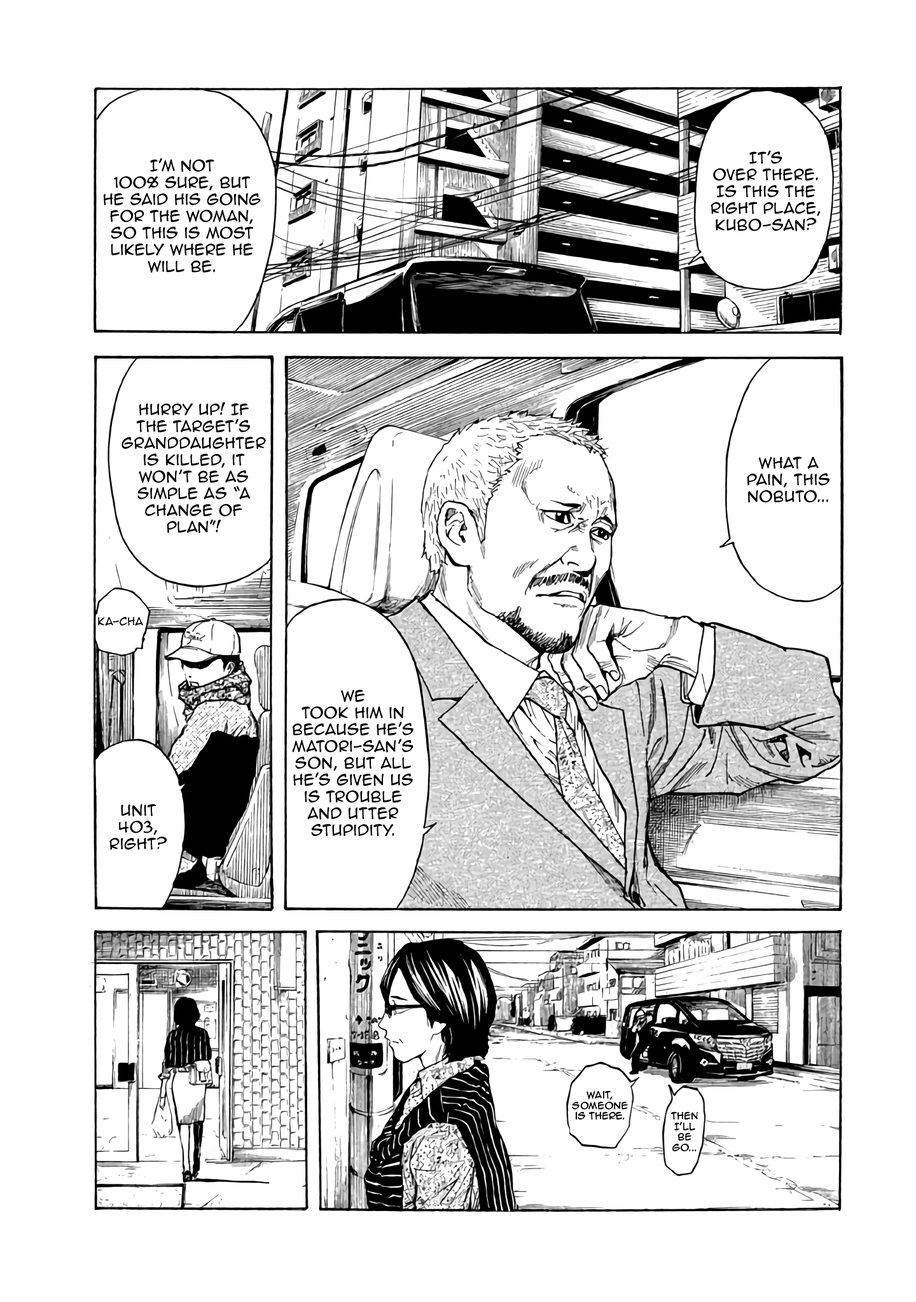
<style>
.page{position:relative;width:916px;height:1302px;background:#ffffff}
.page>*{position:absolute;margin:0}
.t1{font:14px "AnimeAce2.0BB";color:#000000}
.t2{font:10.2px "AnimeAce2.0BB";color:#000000}
.t3{font:8.9px "AnimeAce2.0BB";color:#000000}
</style>
<div class="page">
<p class="t1" style="left:104px;top:158px;width:157px;height:115px;text-align:center">I’m not <br>100% sure, but he said his going for the woman, so this is most likely where he will be.</p>
<p class="t1" style="left:710px;top:150px;width:110px;height:81px;text-align:center">It’s <br>over there. Is this the right place, kubo-san?</p>
<p class="t1" style="left:121px;top:402px;width:145px;height:131px;text-align:center">Hurry up! If the target’s granddaughter is killed, it <br>won’t be as simple as “a change of <br>plan”!</p>
<p class="t1" style="left:747px;top:457px;width:82px;height:46px;text-align:center">What a pain, this nobuto...</p>
<p class="t2" style="left:98px;top:617px;width:45px;height:9px">ka-cha</p>
<p class="t1" style="left:292px;top:690px;width:121px;height:146px;text-align:center">We <br>took him in because he’s Matori-san’s son, but all he’s given us is trouble and utter  stupidity.</p>
<p class="t1" style="left:109px;top:804px;width:58px;height:46px;text-align:center">Unit 403, right?</p>
<p class="t3" style="left:572px;top:1091px;width:56px;height:29px;text-align:center">Wait, someone is there.</p>
<p class="t3" style="left:671px;top:1112px;width:27px;height:40px;text-align:center">Then I’ll be go...</p>
</div>
